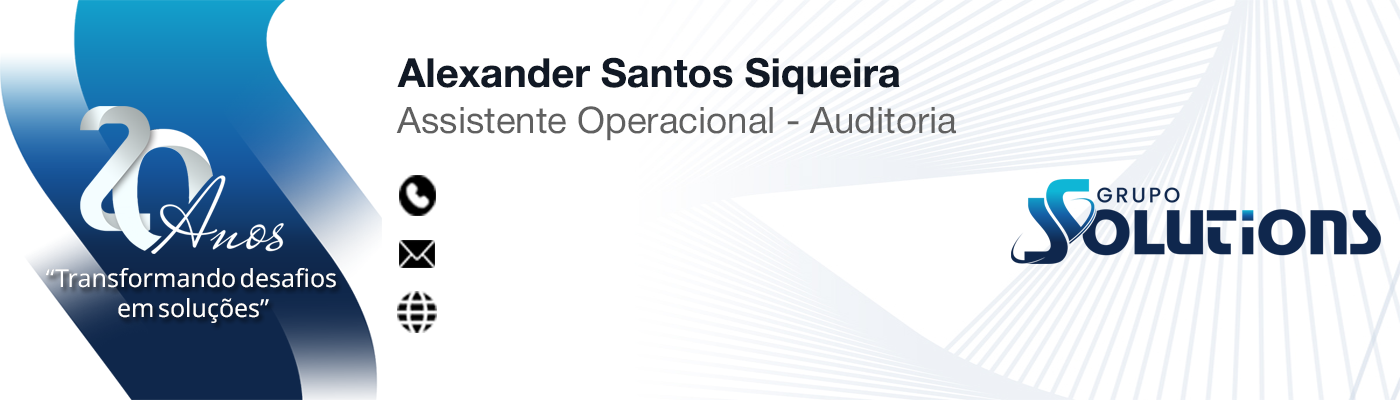
<style>
.page{position:relative;width:1400px;height:400px;background:#ffffff}
.page>*{position:absolute;margin:0}
.t1{font:40px "HelveticaNeue-Bold";color:#111925}
.t2{font:36.7px "HelveticaNeue-Roman";color:#606060}
.t3{font:25px "SansSerifCollection";color:#ffffff}
</style>
<div class="page">
<p class="t1" style="left:397px;top:57px;width:503px;height:38px">Alexander Santos Siqueira</p>
<p class="t2" style="left:396px;top:106px;width:560px;height:35px">Assistente Operacional - Auditoria</p>
<p class="t3" style="left:45px;top:268px;width:291px;height:55px;text-align:center">“Transformando desafios <br>em soluções”</p>
</div>
